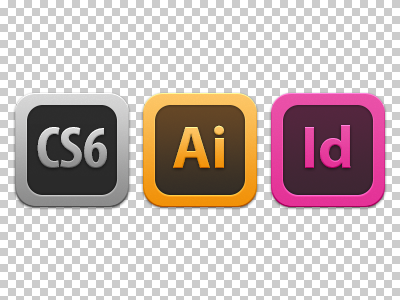
<style>
.page{position:relative;width:400px;height:300px;background:#cccccc}
.page>*{position:absolute;margin:0}
.t1{font:60px "MyriadPro-Bold"}
.t2{font:60.2px "MyriadPro-Bold";color:#e63e9e}
.t3{font:60px "MyriadPro-BoldCond"}
</style>
<div class="page">
<p class="t1" style="left:173px;top:125px;width:51px;height:43px">Ai</p>
<p class="t2" style="left:305px;top:125px;width:46px;height:43px">Id</p>
<p class="t3" style="left:37px;top:127px;width:70px;height:41px">CS6</p>
</div>
